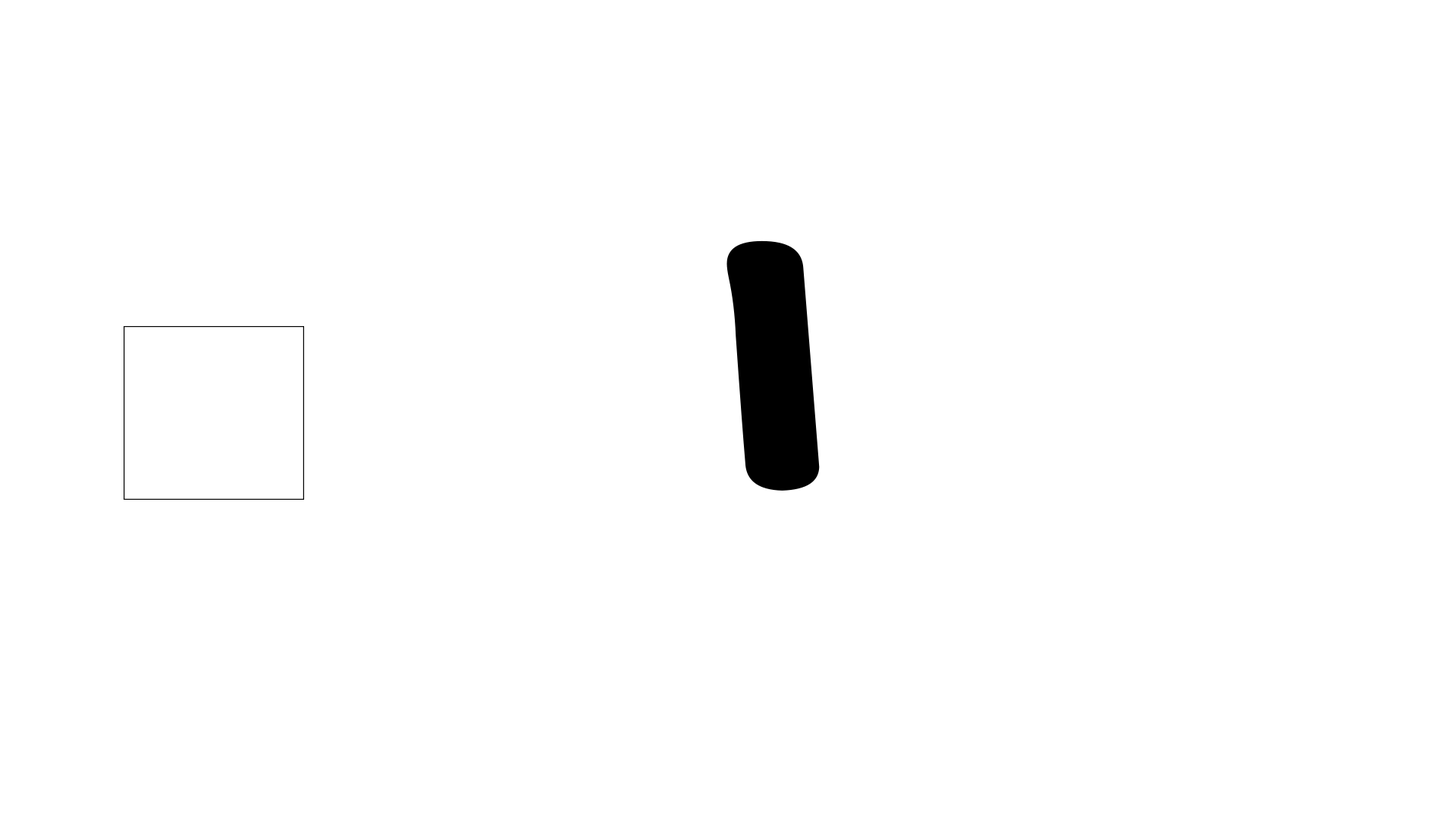
<style>
.page{position:relative;width:1456px;height:819px;background:#ffffff}
.page>*{position:absolute;margin:0}
.t1{font:337px "DFMaruMoji-W7-WING-RKSJ-H";color:#000000;scale:1.93 1}
</style>
<div class="page">
<p class="t1" style="left:726px;top:240px;width:94px;height:251px">1</p>
</div>
